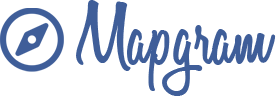
<style>
.page{position:relative;width:276px;height:96px;background:#ffffff}
.page>*{position:absolute;margin:0}
.t1{font:80.2px "VarianeScript";color:#3f5e99}
</style>
<div class="page">
<p class="t1" style="left:76px;top:0px;width:200px;height:96px">Mapgram</p>
</div>
